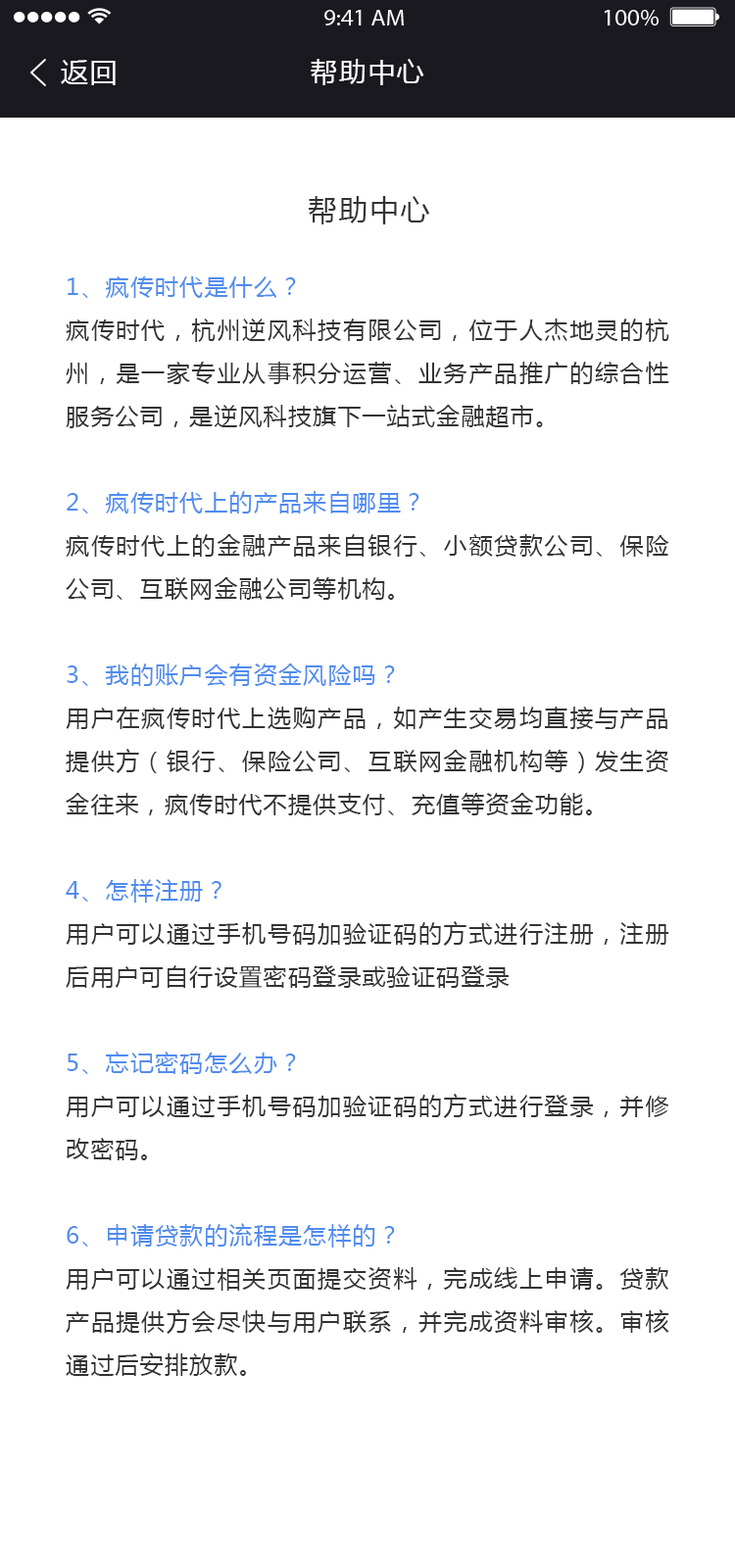
<style>
.page{position:relative;width:735px;height:1568px;background:#ffffff}
.page>*{position:absolute;margin:0}
.t1{font:27.4px "MicrosoftYaHei";letter-spacing:0.05em;color:#ffffff}
.t2{font:29.4px "MicrosoftYaHei";letter-spacing:0.05em;color:#333333}
.t3{font:23.5px/43.1px "MicrosoftYaHei";letter-spacing:0.05em;color:#333333}
.t4{font:23.5px/43.1px "MicrosoftYaHei";letter-spacing:0.05em;color:#508cee}
</style>
<div class="page">
<p class="t1" style="left:61px;top:60px;width:55px;height:25px">返回</p>
<p class="t1" style="left:311px;top:59px;width:113px;height:26px">帮助中心</p>
<p class="t2" style="left:309px;top:196px;width:121px;height:28px">帮助中心</p>
<p class="t3" style="left:66px;top:276px;width:603px;height:1100px;text-align:justify"><span class="t4">1、疯传时代是什么？<br></span>疯传时代，杭州逆风科技有限公司，位于人杰地灵的杭州，是一家专业从事积分运营、业务产品推广的综合性服务公司，是逆风科技旗下一站式金融超市。<br><br><span class="t4">2、疯传时代上的产品来自哪里？<br></span>疯传时代上的金融产品来自银行、小额贷款公司、保险公司、互联网金融公司等机构。<br><br><span class="t4">3、我的账户会有资金风险吗？<br></span>用户在疯传时代上选购产品，如产生交易均直接与产品提供方（银行、保险公司、互联网金融机构等）发生资金往来，疯传时代不提供支付、充值等资金功能。<br><br><span class="t4">4、怎样注册？<br></span>用户可以通过手机号码加验证码的方式进行注册，注册后用户可自行设置密码登录或验证码登录<br><br><span class="t4">5、忘记密码怎么办？ <br></span>用户可以通过手机号码加验证码的方式进行登录，并修改密码。<br><br><span class="t4">6、申请贷款的流程是怎样的？<br></span>用户可以通过相关页面提交资料，完成线上申请。贷款产品提供方会尽快与用户联系，并完成资料审核。审核通过后安排放款。<br><br><span class="t4">7、贷款的时间需要多久？<br></span>贷款时间视不同的产品会有所不同，用户可以查看具体的贷款产品页上的文字说明。<br><br><span class="t4">8、我能查询我之前浏览记录吗？<br></span>用户可以在我的账户查看之前浏览记录。</p>
</div>
